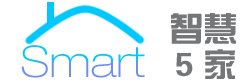
<style>
.page{position:relative;width:245px;height:83px;background:#ffffff}
.page>*{position:absolute;margin:0}
.t1{font:34.4px "JZhongYi";color:#747677}
.t2{font:43px "HelveticaNeueLT-ThinExt"}
.t3{font:33.3px "JZhongYi";color:#747677}
</style>
<div class="page">
<p class="t1" style="left:171px;top:13px;width:65px;height:31px">智慧</p>
<p class="t2" style="left:21px;top:45px;width:124px;height:33px">Smart</p>
<p class="t3" style="left:176px;top:49px;width:60px;height:30px">5 家</p>
</div>
